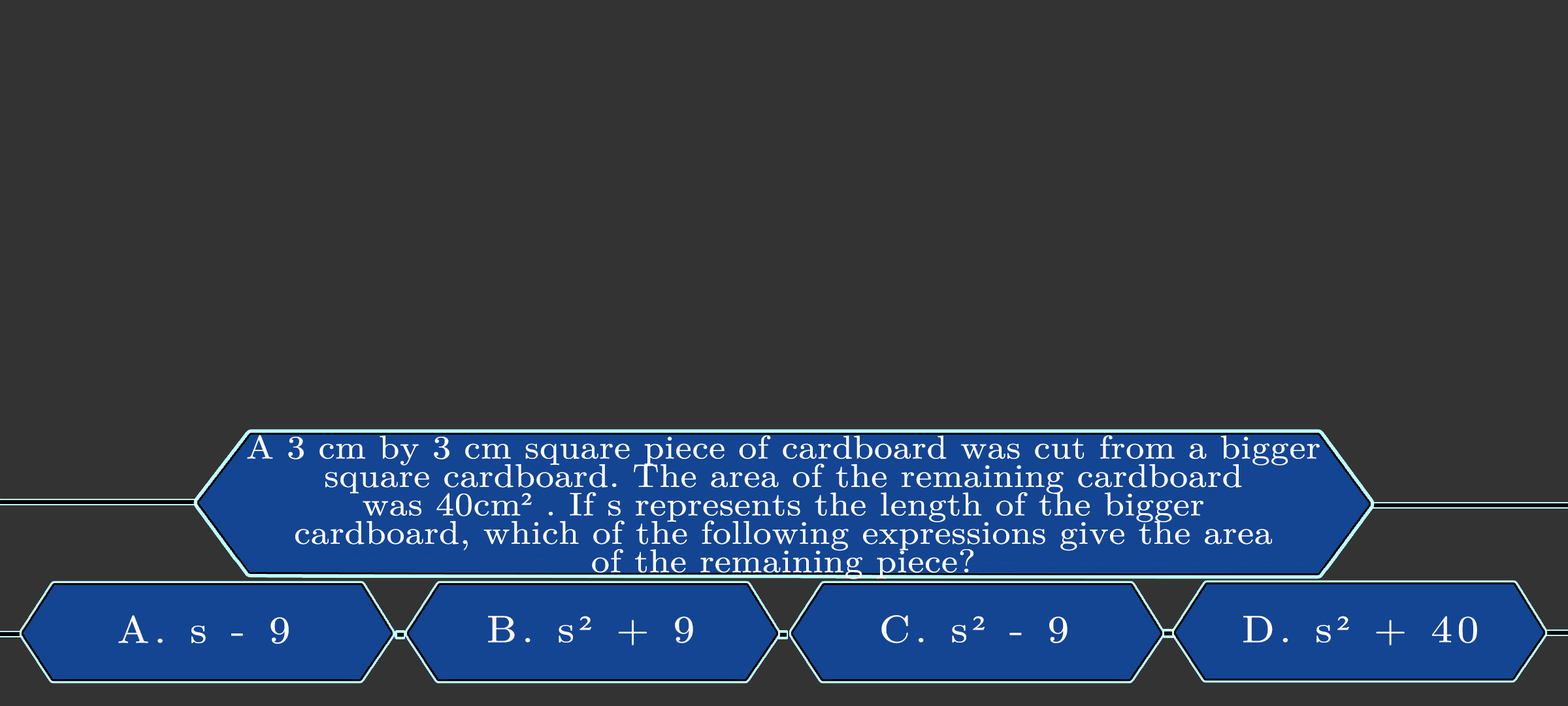
<style>
.page{position:relative;width:1568px;height:706px;background:#333333}
.page>*{position:absolute;margin:0}
.t1{font:32.7px/28.4px "LatinModernMath-Regular";letter-spacing:0.015em;color:#ffffff;scale:1.12 1}
.t2{font:32.7px/28.4px "TimesNewRomanPSMT";letter-spacing:0.015em;color:#ffffff;scale:1.12 1}
.t3{font:38.1px "LatinModernMath-Regular";letter-spacing:0.115em;color:#fdfdfd;scale:1.12 1}
.t4{font:38.1px "LatinModernMath-Regular";letter-spacing:0.115em;color:#fcf9f9;scale:1.12 1}
.t5{font:38.1px "TimesNewRomanPSMT";letter-spacing:0.115em;color:#fcf9f9;scale:1.12 1}
.t6{font:38.1px "LatinModernMath-Regular";letter-spacing:0.115em;color:#fdfcfc;scale:1.12 1}
.t7{font:38.1px "TimesNewRomanPSMT";letter-spacing:0.115em;color:#fdfcfc;scale:1.12 1}
.t8{font:38.1px "LatinModernMath-Regular";letter-spacing:0.115em;color:#fffdfd;scale:1.12 1}
.t9{font:38.1px "TimesNewRomanPSMT";letter-spacing:0.115em;color:#fffdfd;scale:1.12 1}
</style>
<div class="page">
<p class="t1" style="left:247px;top:434px;width:1073px;height:145px;text-align:center">A 3 cm by 3 cm square piece of cardboard was cut from a bigger<br>square cardboard. The area of the remaining cardboard<br>was 40cm<span class="t2">²</span> . If s represents the length of the bigger<br>cardboard, which of the following expressions give the area<br>of the remaining piece?</p>
<p class="t3" style="left:118px;top:615px;width:171px;height:29px">A. s - 9</p>
<p class="t4" style="left:488px;top:615px;width:205px;height:30px">B. s<span class="t5">²</span> + 9</p>
<p class="t6" style="left:881px;top:615px;width:187px;height:28px">C. s<span class="t7">²</span> - 9</p>
<p class="t8" style="left:1243px;top:615px;width:234px;height:30px">D. s<span class="t9">²</span> + 40</p>
</div>
